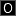
<style>
.page{position:relative;width:16px;height:16px;background:#000000}
.page>*{position:absolute;margin:0}
.t1{font:15px "FinelinerScript";color:#ffffff}
</style>
<div class="page">
<p class="t1" style="left:3px;top:3px;width:10px;height:10px">O</p>
</div>
